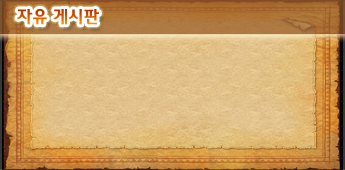
<style>
.page{position:relative;width:345px;height:170px}
.page>*{position:absolute;margin:0}
.t1{font:18px "2002L"}
</style>
<div class="page">
<p class="t1" style="left:17px;top:9px;width:82px;height:16px">자유 게시판</p>
</div>
